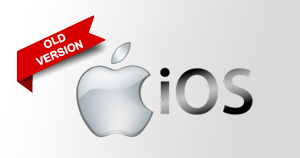
<style>
.page{position:relative;width:300px;height:158px}
.page>*{position:absolute;margin:0}
.t1{font:11px "Arial-BoldMT";color:#ffffff}
</style>
<div class="page">
<p class="t1" style="left:35px;top:33px;width:49px;height:32px;text-align:center;rotate:-23deg">OLD<br>VERSION</p>
</div>
